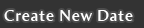
<style>
.page{position:relative;width:144px;height:28px;background:#333333}
.page>*{position:absolute;margin:0}
.t1{font:16px "AmiraParadiso";letter-spacing:0.05em;color:#ffffff}
</style>
<div class="page">
<p class="t1" style="left:4px;top:10px;width:129px;height:11px">Create New Date</p>
</div>
